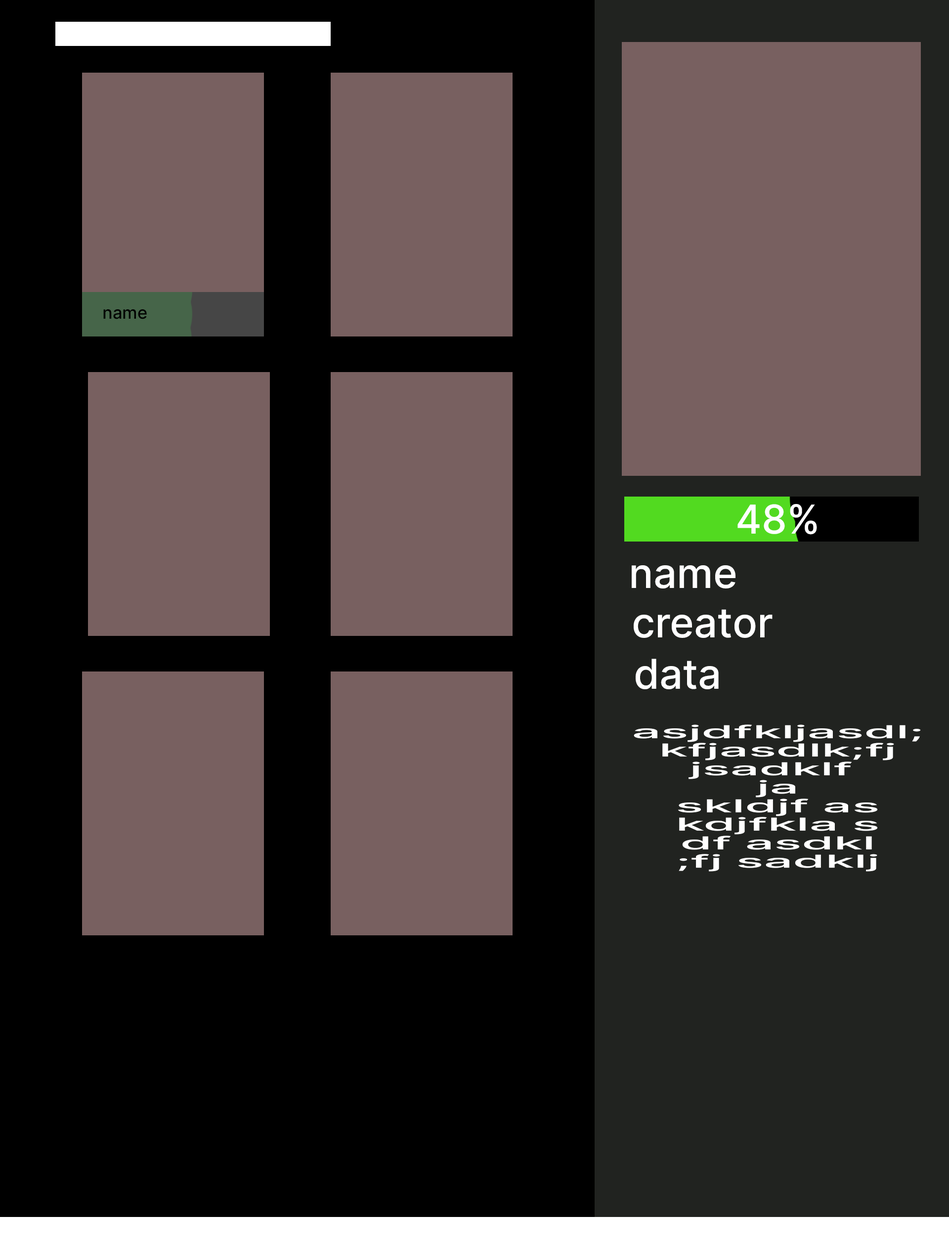
<style>
.page{position:relative;width:949px;height:1257px;background:#000000}
.page>*{position:absolute;margin:0}
.t1{font:17px "Inter-Medium";color:#000000}
.t2{font:39.9px "Inter-Medium";color:#ffffff}
.t3{font:41.1px "Inter-Medium";color:#ffffff}
.t4{font:18px/18.5px "Inter-Medium";color:#ffffff;scale:2.87 1}
</style>
<div class="page">
<p class="t1" style="left:103px;top:309px;width:44px;height:10px">name</p>
<p class="t2" style="left:737px;top:504px;width:80px;height:31px">48%</p>
<p class="t3" style="left:631px;top:565px;width:104px;height:23px">name</p>
<p class="t3" style="left:633px;top:609px;width:139px;height:29px">creator</p>
<p class="t3" style="left:635px;top:659px;width:83px;height:30px">data</p>
<p class="t4" style="left:633px;top:724px;width:287px;height:148px;text-align:center">asjdfkljasdl;<br>kfjasdlk;fj<br>jsadklf <br>ja<br>skldjf as<br>kdjfkla s<br>df asdkl<br>;fj sadklj</p>
</div>
